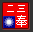
<style>
.page{position:relative;width:33px;height:32px;background:#f20000}
.page>*{position:absolute;margin:0}
.t1{font:10.4px "SimSun";color:#ffffff}
.t2{font:11.7px "SimSun";color:#ffffff}
</style>
<div class="page">
<p class="t1" style="left:7px;top:5px;width:18px;height:7px">二三</p>
<p class="t2" style="left:16px;top:15px;width:11px;height:12px">奉</p>
</div>
